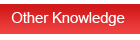
<style>
.page{position:relative;width:140px;height:40px;background:#ffffff}
.page>*{position:absolute;margin:0}
.t1{font:14.7px "ArialMT";color:#ffffff}
</style>
<div class="page">
<p class="t1" style="left:11px;top:12px;width:114px;height:14px">Other Knowledge</p>
</div>
